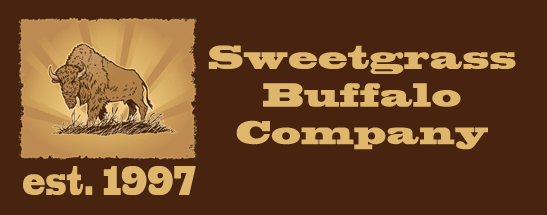
<style>
.page{position:relative;width:547px;height:215px;background:#472310}
.page>*{position:absolute;margin:0}
.t1{font:31.3px "BlackoakStd";color:#deb76d;scale:0.71 1}
.t2{font:38.6px "BlackoakStd";color:#deb76d;scale:0.45 1}
</style>
<div class="page">
<p class="t1" style="left:208px;top:45px;width:308px;height:105px;text-align:center">Sweetgrass<br>Buffalo<br>Company</p>
<p class="t2" style="left:23px;top:166px;width:173px;height:29px">est. 1997</p>
</div>
